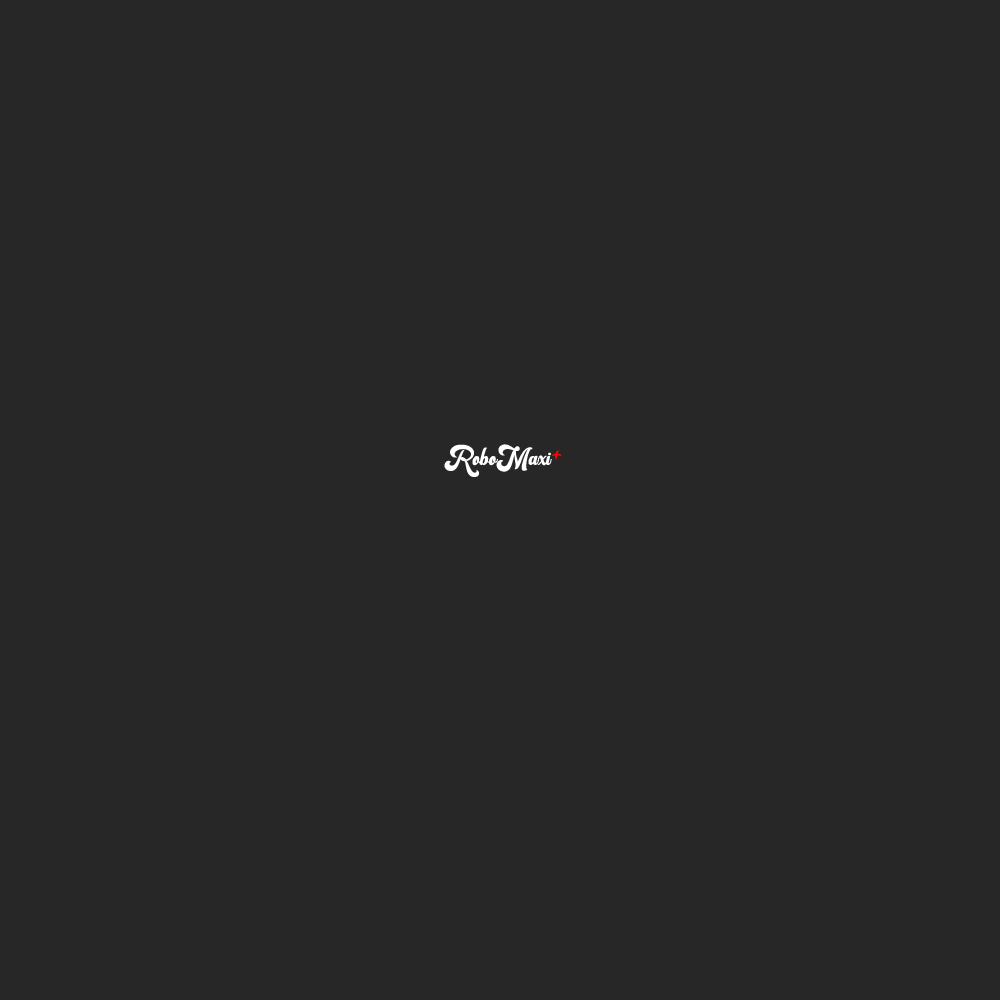
<style>
.page{position:relative;width:1000px;height:1000px;background:#272727}
.page>*{position:absolute;margin:0}
.t1{font:24px "VintagePartyFreeVersion";color:#ffffff}
.t2{font:24px "VintagePartyFreeVersion";color:#ff0000}
</style>
<div class="page">
<p class="t1" style="left:444px;top:444px;width:118px;height:33px">RoboMaxi<span class="t2">+</span></p>
</div>
